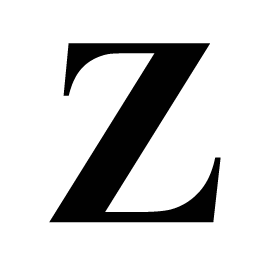
<style>
.page{position:relative;width:269px;height:269px;background:#ffffff}
.page>*{position:absolute;margin:0}
.t1{font:270px "TimesNewRomanPS-BoldMT";color:#010101}
</style>
<div class="page">
<p class="t1" style="left:49px;top:43px;width:172px;height:180px">Z</p>
</div>
